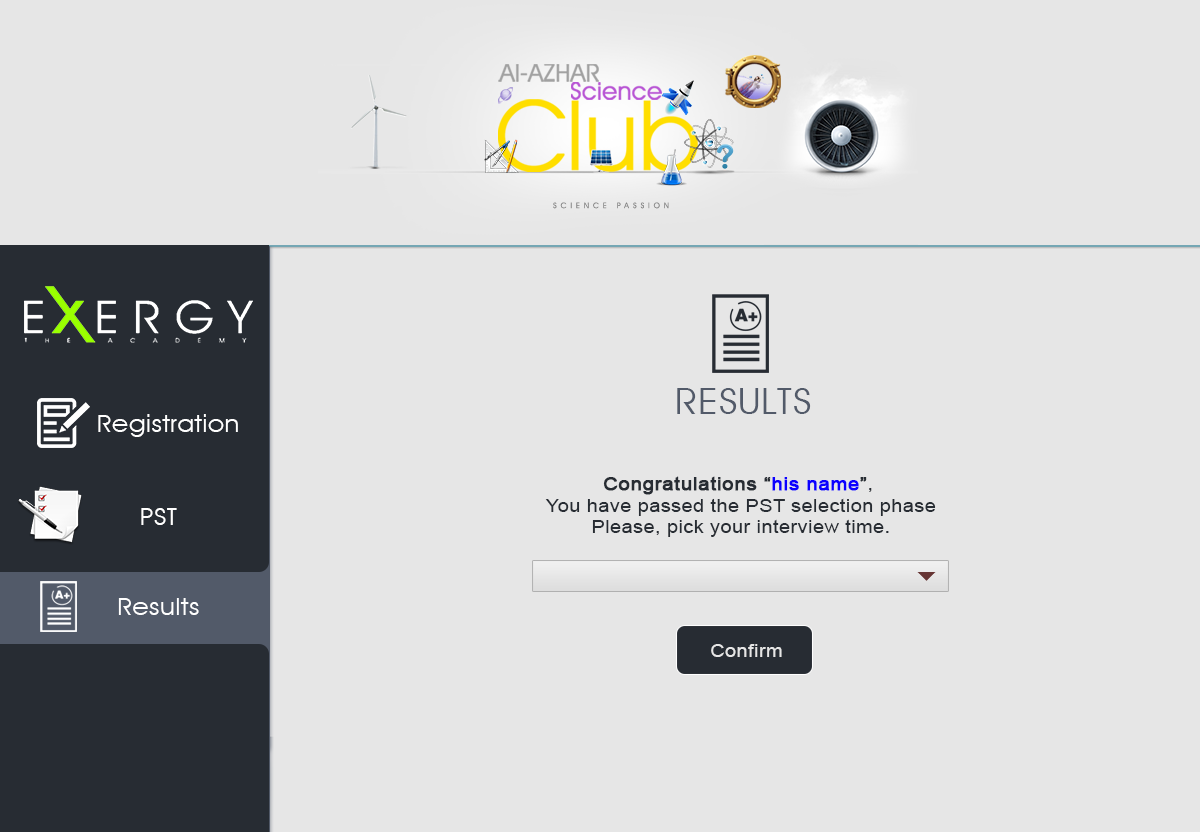
<style>
.page{position:relative;width:1200px;height:832px;background:#e6e6e6}
.page>*{position:absolute;margin:0}
.t1{font:36px "AvantGardeITCbyBT-Book";letter-spacing:0.025em;color:#525a69;text-transform:uppercase;scale:1.1 1}
.t2{font:24px "AvantGardeITCbyBT-Book";letter-spacing:0.025em;color:#ffffff;scale:1.1 1}
.t3{font:18px "ArialMT";letter-spacing:0.025em;color:#272c33;scale:1.1 1}
.t4{font:18px "ArialMT";letter-spacing:0.025em;color:#272c33;font-weight:bold;scale:1.1 1}
.t5{font:18px "ArialMT";letter-spacing:0.025em;color:#0c00ff;font-weight:bold;scale:1.1 1}
.t6{font:18px "ArialMT";letter-spacing:0.025em;color:#e6e6e6;scale:1.1 1}
</style>
<div class="page">
<p class="t1" style="left:677px;top:388px;width:134px;height:26px">RESULTS</p>
<p class="t2" style="left:98px;top:414px;width:140px;height:23px">Registration</p>
<p class="t3" style="left:545px;top:476px;width:391px;height:61px;text-align:center"><span class="t4">Congratulations “</span><span class="t5">his name</span><span class="t4">”</span>, <br>You have passed the PST selection phase<br>Please, pick your interview time.</p>
<p class="t2" style="left:141px;top:508px;width:36px;height:17px">PST</p>
<p class="t2" style="left:118px;top:598px;width:81px;height:17px">Results</p>
<p class="t6" style="left:711px;top:644px;width:71px;height:13px">Confirm</p>
</div>
